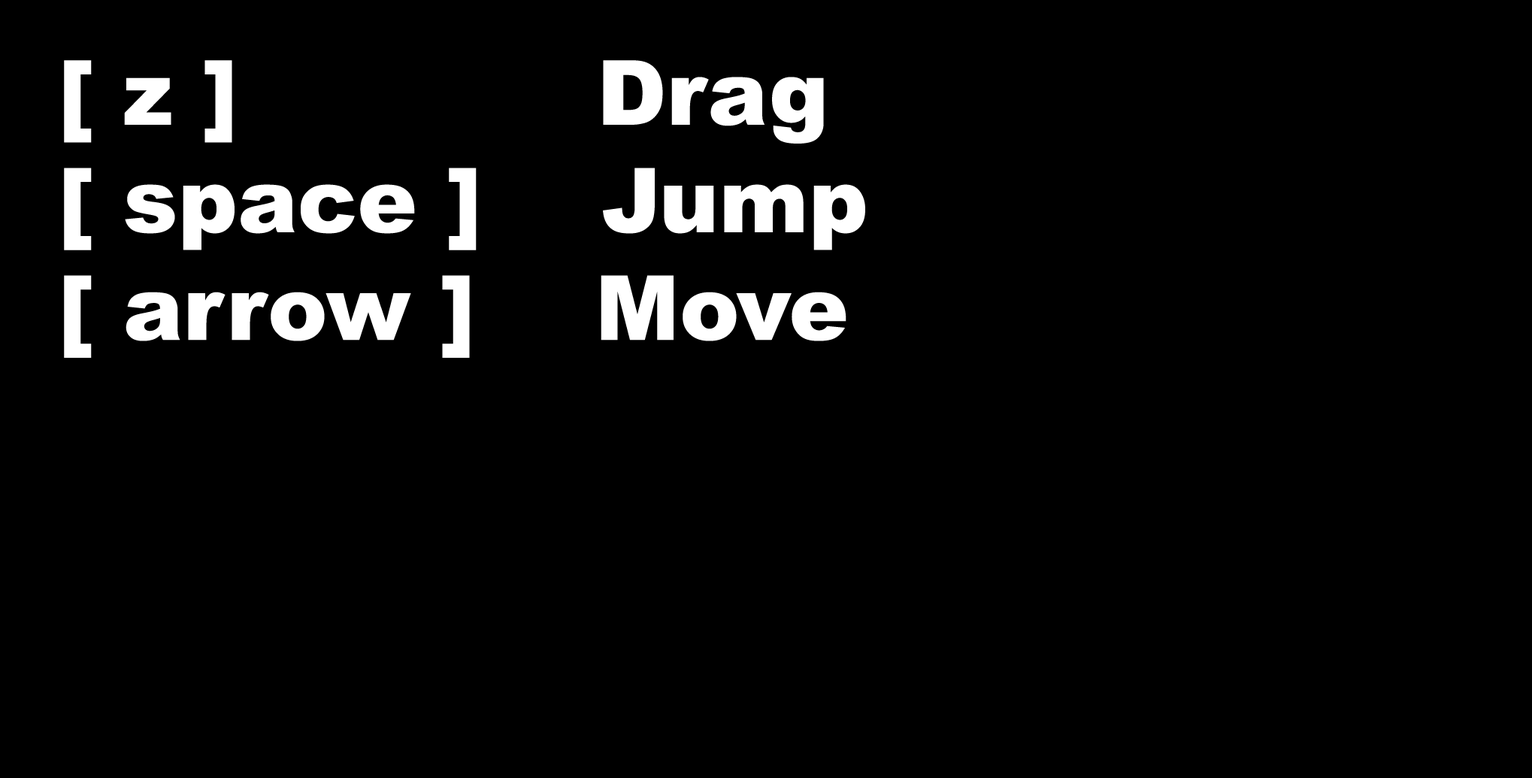
<style>
.page{position:relative;width:1532px;height:778px;background:#000000}
.page>*{position:absolute;margin:0}
.t1{font:89.7px "Arial-Black";color:#ffffff}
</style>
<div class="page">
<p class="t1" style="left:64px;top:60px;width:801px;height:298px">[ z ]            Drag<br>[ space ]    Jump<br>[ arrow ]    Move</p>
</div>
